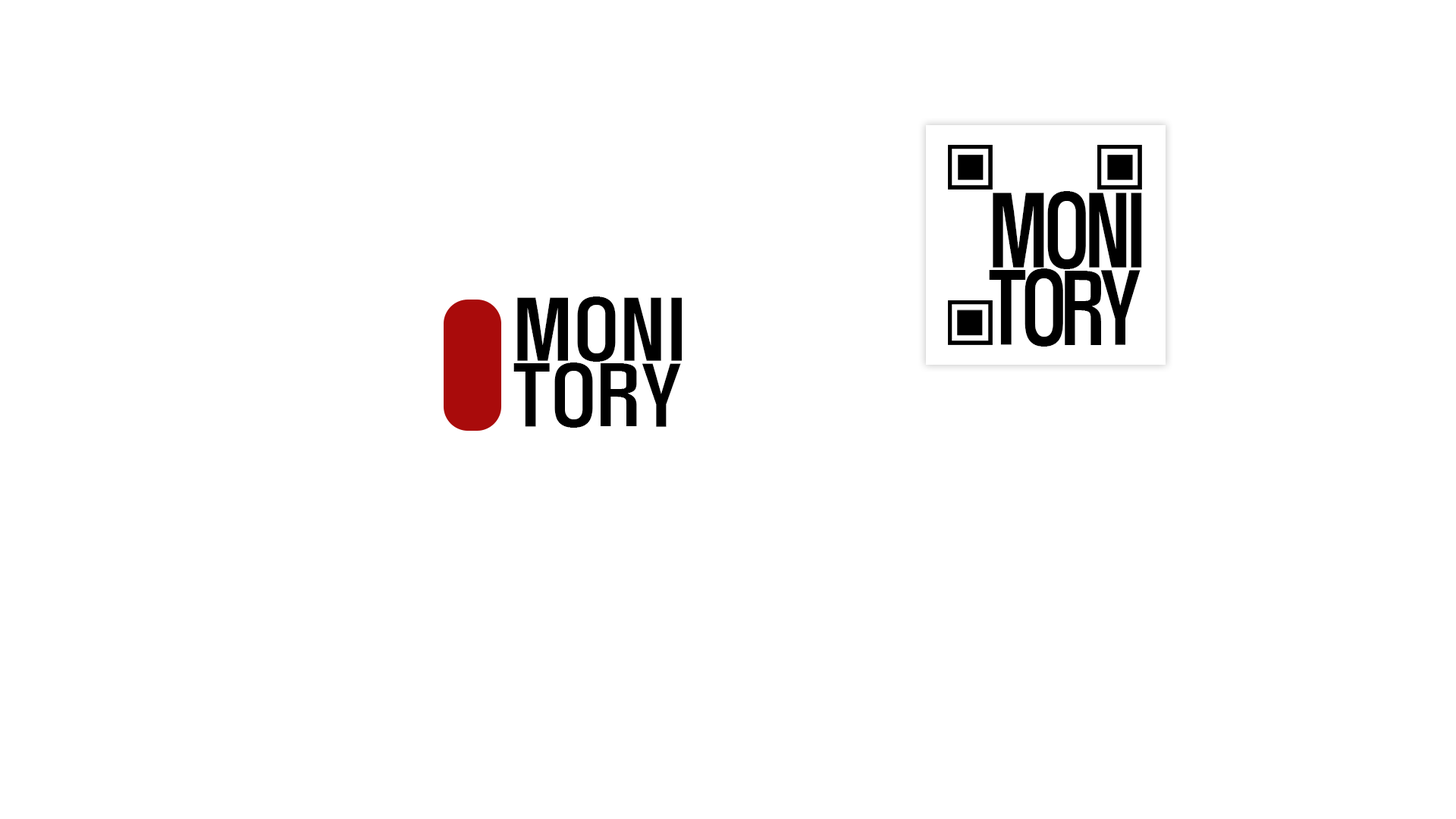
<style>
.page{position:relative;width:1456px;height:819px;background:#ffffff}
.page>*{position:absolute;margin:0}
.t1{font:87.7px/77.1px "H2hdrM";letter-spacing:-0.04em;color:#000000;scale:0.85 1}
.t2{font:87.7px/86.3px "H2hdrM";letter-spacing:-0.06em;color:#000000;scale:0.85 1}
.t3{font:74.3px/66px "H2hdrM";letter-spacing:0.04em;color:#000000}
.t4{font:74.3px/66px "H2hdrM";letter-spacing:0.02em;color:#000000}
</style>
<div class="page">
<p class="t1" style="left:989px;top:191px;width:153px;height:156px">MONI<br><span class="t2">TORY</span></p>
<p class="t3" style="left:513px;top:297px;width:169px;height:131px">MONI<br><span class="t4">TORY</span></p>
</div>
